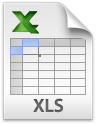
<style>
.page{position:relative;width:96px;height:124px}
.page>*{position:absolute;margin:0}
.t1{font:19px "MyriadPro-Semibold";color:#626262}
</style>
<div class="page">
<p class="t1" style="left:33px;top:98px;width:30px;height:15px">XLS</p>
</div>
